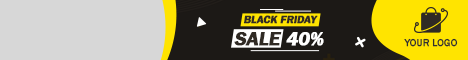
<style>
.page{position:relative;width:468px;height:60px;background:#d7d7d7}
.page>*{position:absolute;margin:0}
.t1{font:11px "FranklinGothic-Demi";letter-spacing:-0.015em;color:#302a24;font-weight:bold}
.t2{font:19.6px "FranklinGothic-Demi";letter-spacing:-0.015em;color:#302a24;font-weight:bold}
.t3{font:19.6px "FranklinGothic-Demi";letter-spacing:-0.015em;color:#ffffff;font-weight:bold}
.t4{font:10.2px "FranklinGothic-Medium";color:#303030;font-weight:bold}
</style>
<div class="page">
<p class="t1" style="left:243px;top:15px;width:75px;height:9px">BLACK FRIDAY</p>
<p class="t2" style="left:234px;top:32px;width:48px;height:14px">SALE</p>
<p class="t3" style="left:286px;top:32px;width:38px;height:14px">40%</p>
<p class="t4" style="left:404px;top:38px;width:54px;height:9px">YOUR LOGO</p>
</div>
